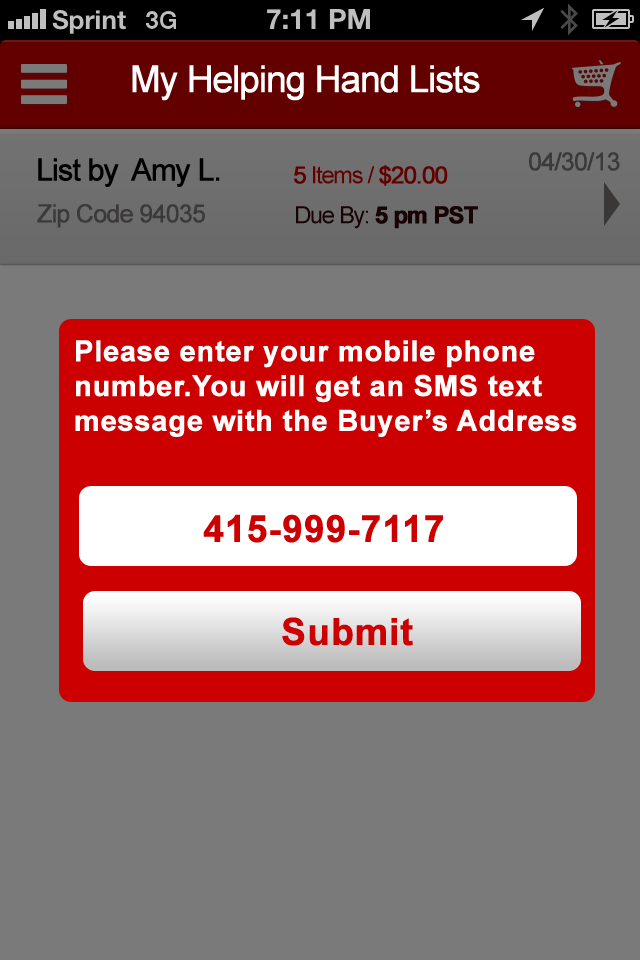
<style>
.page{position:relative;width:640px;height:960px;background:#7a7a7a}
.page>*{position:absolute;margin:0}
.t1{font:37.1px "ArialMT";letter-spacing:-0.055em;color:#ffffff;font-weight:bold}
.t2{font:30.4px "ArialMT";letter-spacing:-0.055em;color:#000000;font-weight:bold}
.t3{font:25px "ArialMT";letter-spacing:-0.055em;color:#3b3939;font-weight:bold}
.t4{font:23.7px "ArialMT";letter-spacing:-0.055em;color:#620000}
.t5{font:23.7px "ArialMT";letter-spacing:-0.055em;color:#620000;font-weight:bold}
.t6{font:23.7px "Arial-BoldMT";letter-spacing:-0.055em;color:#170303;font-weight:bold}
.t7{font:23.7px "ArialMT";letter-spacing:-0.055em;color:#170303}
.t8{font:29px "Arial-BoldMT";color:#fefefe;font-weight:bold}
.t9{font:37.3px "Arial-BoldMT";color:#cc0000;font-weight:bold}
</style>
<div class="page">
<p class="t1" style="left:132px;top:65px;width:348px;height:36px">My Helping Hand Lists</p>
<p class="t2" style="left:38px;top:158px;width:182px;height:29px">List by  Amy L.</p>
<p class="t3" style="left:529px;top:152px;width:91px;height:19px">04/30/13</p>
<p class="t4" style="left:294px;top:165px;width:154px;height:21px"><span class="t5">5</span> Items / <span class="t5">$20.00</span></p>
<p class="t3" style="left:37px;top:204px;width:168px;height:24px">Zip Code 94035</p>
<p class="t6" style="left:296px;top:206px;width:182px;height:23px"><span class="t7">Due By: </span>5 pm PST</p>
<p class="t8" style="left:75px;top:340px;width:502px;height:97px">Please enter your mobile phone number.You will get an SMS text message with the Buyer’s Address</p>
<p class="t9" style="left:203px;top:514px;width:240px;height:29px">415-999-7117</p>
<p class="t9" style="left:282px;top:617px;width:131px;height:29px">Submit</p>
</div>
